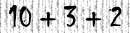
<style>
.page{position:relative;width:130px;height:33px;background:#ffffff}
.page>*{position:absolute;margin:0}
.t1{font:30px "Chiller-Regular";color:#000000;font-weight:bold;scale:0.9 1}
</style>
<div class="page">
<p class="t1" style="left:9px;top:5px;width:113px;height:22px">10 + 3 + 2</p>
</div>
